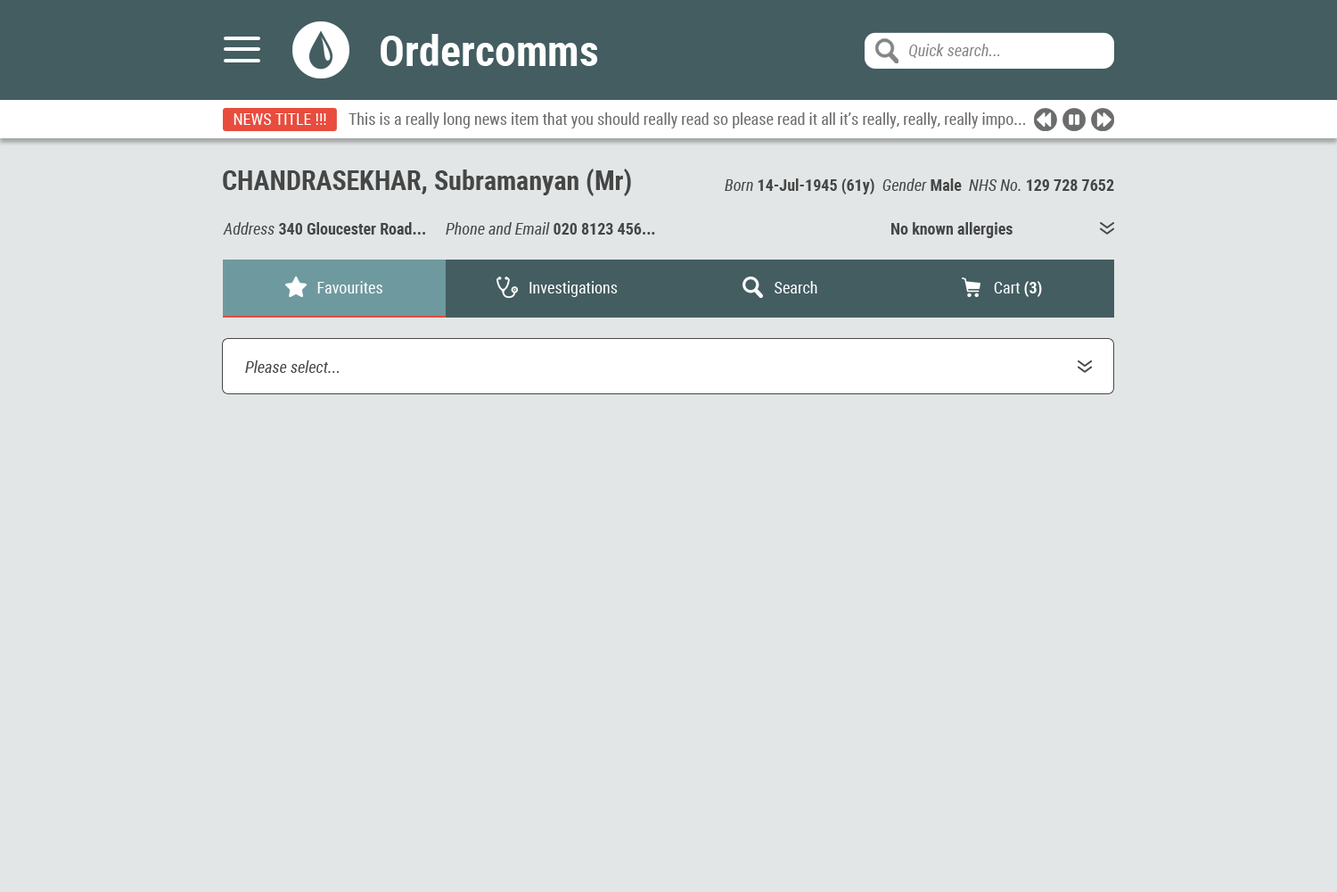
<style>
.page{position:relative;width:1337px;height:892px;background:#e3e6e6}
.page>*{position:absolute;margin:0}
.t1{font:42.8px "RobotoCondensed-Bold";color:#ffffff}
.t2{font:16px "RobotoCondensed-Italic";color:#848585}
.t3{font:16px "RobotoCondensed-Regular";color:#ffffff}
.t4{font:16px "RobotoCondensed-Regular";color:#6b6c6c}
.t5{font:26.7px "RobotoCondensed-Bold";color:#454646}
.t6{font:16px "RobotoCondensed-Bold";color:#454646}
.t7{font:16px "RobotoCondensed-Italic";color:#454646}
.t8{font:16px "RobotoCondensed-Bold";color:#ffffff}
</style>
<div class="page">
<p class="t1" style="left:381px;top:34px;width:217px;height:32px">Ordercomms</p>
<p class="t2" style="left:909px;top:44px;width:91px;height:14px">Quick search...</p>
<p class="t3" style="left:234px;top:113px;width:92px;height:12px">NEWS TITLE !!!</p>
<p class="t4" style="left:349px;top:112px;width:676px;height:16px">This is a really long news item that you should really read so please read it all it’s really, really, really impo...</p>
<p class="t5" style="left:223px;top:169px;width:408px;height:27px">CHANDRASEKHAR, Subramanyan (Mr)</p>
<p class="t6" style="left:725px;top:178px;width:390px;height:16px"><span class="t7">Born </span>14-Jul-1945 (61y)  <span class="t7">Gender </span>Male  <span class="t7">NHS No. </span>129 728 7652</p>
<p class="t6" style="left:223px;top:222px;width:202px;height:12px"><span class="t7">Address </span>340 Gloucester Road...</p>
<p class="t7" style="left:446px;top:222px;width:209px;height:12px">Phone and Email <span class="t6">020 8123 456...</span></p>
<p class="t6" style="left:892px;top:222px;width:121px;height:16px">No known allergies</p>
<p class="t3" style="left:317px;top:281px;width:65px;height:12px">Favourites</p>
<p class="t3" style="left:530px;top:281px;width:88px;height:16px">Investigations</p>
<p class="t3" style="left:775px;top:281px;width:43px;height:12px">Search</p>
<p class="t3" style="left:994px;top:281px;width:48px;height:16px">Cart <span class="t8">(3)</span></p>
<p class="t7" style="left:245px;top:360px;width:94px;height:13px">Please select...</p>
</div>
